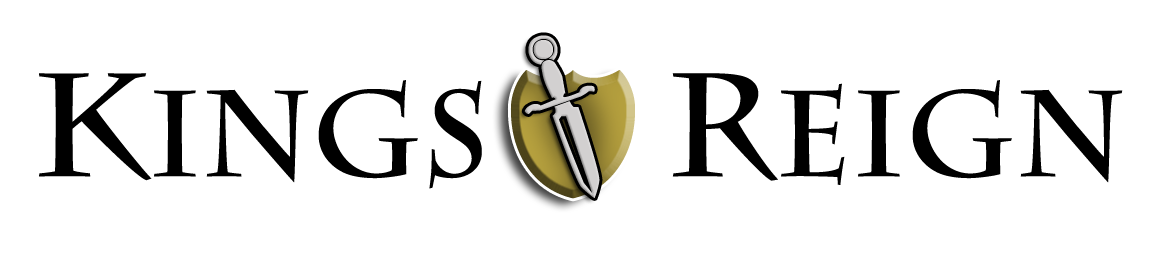
<style>
.page{position:relative;width:1155px;height:258px;background:#ffffff}
.page>*{position:absolute;margin:0}
.t1{font:121.6px "CharlemagneStd-Bold";color:#000000}
.t2{font:145.9px "CharlemagneStd-Bold";color:#000000}
</style>
<div class="page">
<p class="t1" style="left:39px;top:73px;width:1084px;height:116px"><span class="t2">K</span>ings <span class="t2">    R</span>eign</p>
</div>
